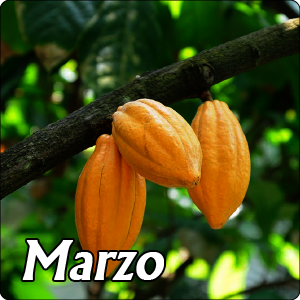
<style>
.page{position:relative;width:300px;height:300px}
.page>*{position:absolute;margin:0}
.t1{font:55.6px "Narkisim";color:#ffffff;font-weight:bold;font-style:italic}
</style>
<div class="page">
<p class="t1" style="left:22px;top:240px;width:142px;height:40px">Marzo</p>
</div>
